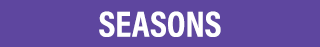
<style>
.page{position:relative;width:320px;height:47px;background:#5e469f}
.page>*{position:absolute;margin:0}
.t1{font:36.3px "AcuminProCond-Bold";color:#ffffff;text-transform:uppercase}
</style>
<div class="page">
<p class="t1" style="left:99px;top:11px;width:122px;height:26px">Seasons</p>
</div>
